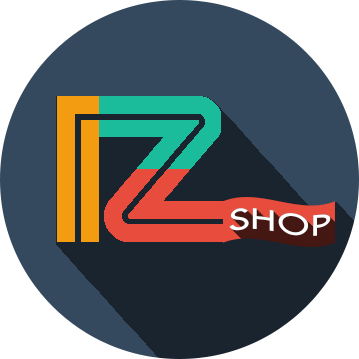
<style>
.page{position:relative;width:359px;height:359px;background:#34495e}
.page>*{position:absolute;margin:0}
.t1{font:33.3px "TwCenMT-Regular";color:#ffffff;scale:1.32 1}
</style>
<div class="page">
<p class="t1" style="left:229px;top:208px;width:102px;height:28px">SHOP</p>
</div>
